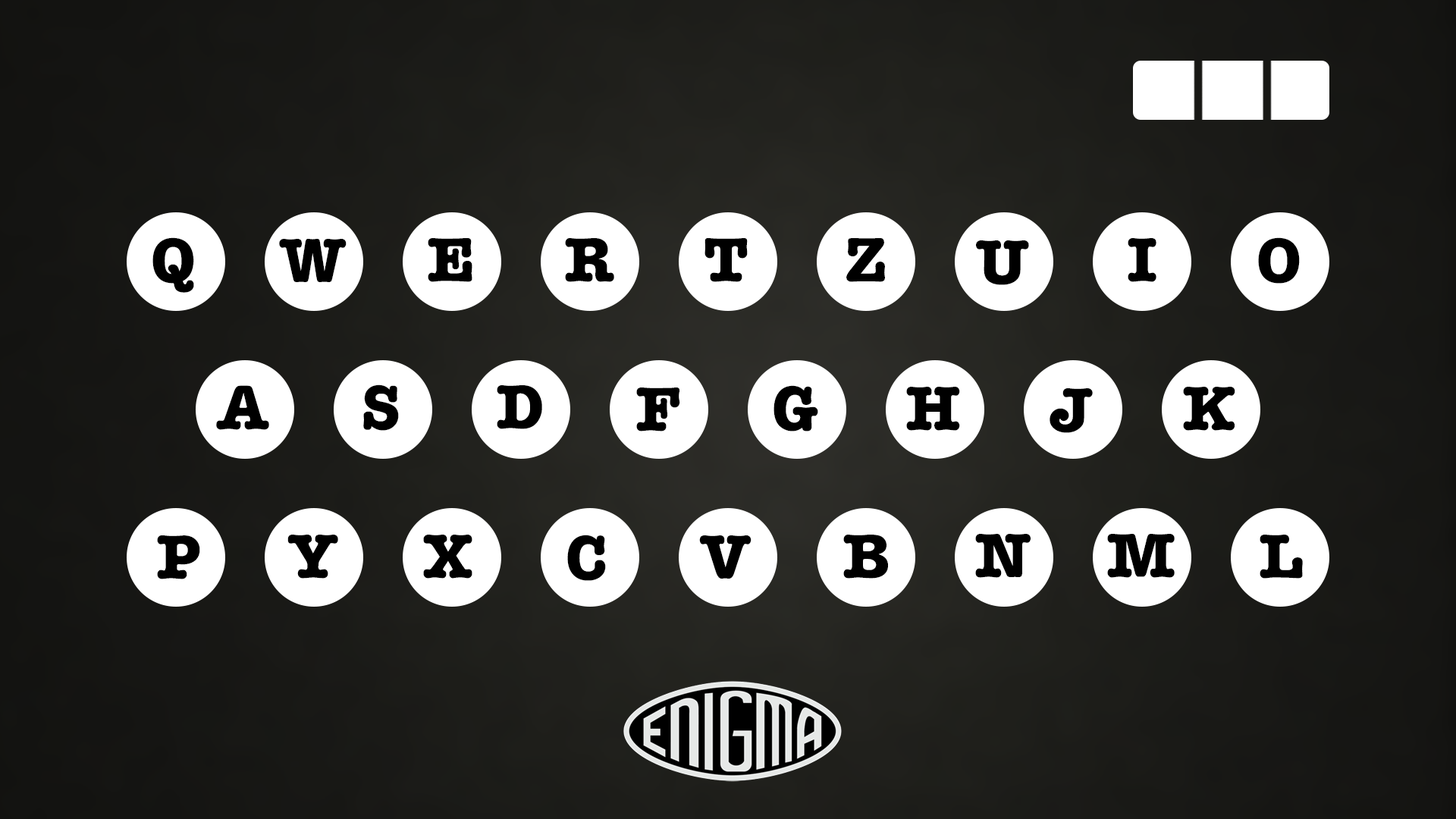
<style>
.page{position:relative;width:1456px;height:819px}
.page>*{position:absolute;margin:0}
.t1{font:64.5px "AmericanTypewriter-Bold";color:#000000}
</style>
<div class="page">
<p class="t1" style="left:152px;top:237px;width:42px;height:56px">Q</p>
<p class="t1" style="left:279px;top:239px;width:68px;height:43px">W</p>
<p class="t1" style="left:428px;top:238px;width:44px;height:44px">E</p>
<p class="t1" style="left:565px;top:238px;width:49px;height:44px">R</p>
<p class="t1" style="left:704px;top:238px;width:44px;height:44px">T</p>
<p class="t1" style="left:846px;top:238px;width:39px;height:44px">Z</p>
<p class="t1" style="left:976px;top:240px;width:53px;height:45px">U</p>
<p class="t1" style="left:1128px;top:238px;width:28px;height:44px">I</p>
<p class="t1" style="left:1258px;top:237px;width:42px;height:47px">O</p>
<p class="t1" style="left:216px;top:385px;width:53px;height:45px">A</p>
<p class="t1" style="left:363px;top:384px;width:36px;height:47px">S</p>
<p class="t1" style="left:497px;top:385px;width:45px;height:44px">D</p>
<p class="t1" style="left:636px;top:388px;width:44px;height:43px">F</p>
<p class="t1" style="left:773px;top:385px;width:45px;height:46px">G</p>
<p class="t1" style="left:906px;top:387px;width:54px;height:44px">H</p>
<p class="t1" style="left:1050px;top:388px;width:43px;height:45px">J</p>
<p class="t1" style="left:1183px;top:387px;width:52px;height:44px">K</p>
<p class="t1" style="left:975px;top:534px;width:56px;height:44px">N</p>
<p class="t1" style="left:1107px;top:534px;width:68px;height:44px">M</p>
<p class="t1" style="left:157px;top:535px;width:43px;height:44px">P</p>
<p class="t1" style="left:287px;top:535px;width:51px;height:44px">Y</p>
<p class="t1" style="left:423px;top:535px;width:49px;height:44px">X</p>
<p class="t1" style="left:567px;top:535px;width:39px;height:46px">C</p>
<p class="t1" style="left:699px;top:535px;width:52px;height:44px">V</p>
<p class="t1" style="left:843px;top:535px;width:45px;height:44px">B</p>
<p class="t1" style="left:1260px;top:535px;width:43px;height:44px">L</p>
</div>
